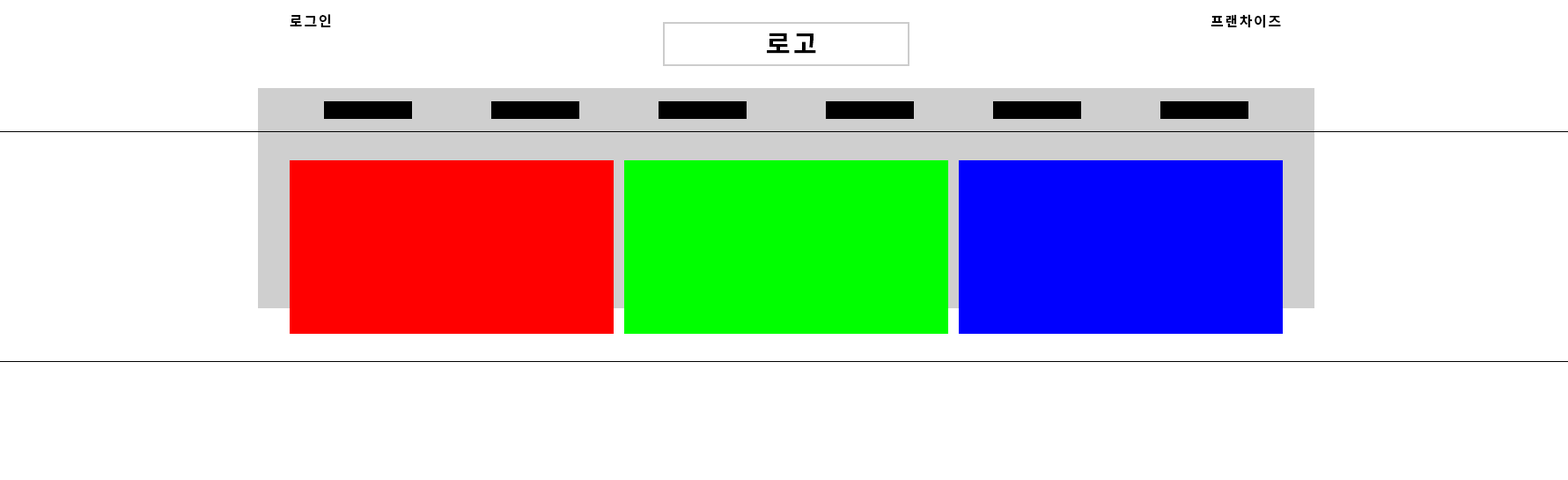
<style>
.page{position:relative;width:1568px;height:480px;background:#ffffff}
.page>*{position:absolute;margin:0}
.t1{font:14.1px "NotoSansKR-Bold";letter-spacing:0.1em;color:#000000}
.t2{font:26.4px "NotoSansKR-Bold";letter-spacing:0.1em;color:#000000}
</style>
<div class="page">
<p class="t1" style="left:290px;top:14px;width:41px;height:13px">로그인</p>
<p class="t1" style="left:1211px;top:14px;width:70px;height:14px">프랜차이즈</p>
<p class="t2" style="left:767px;top:33px;width:49px;height:21px">로고</p>
</div>
